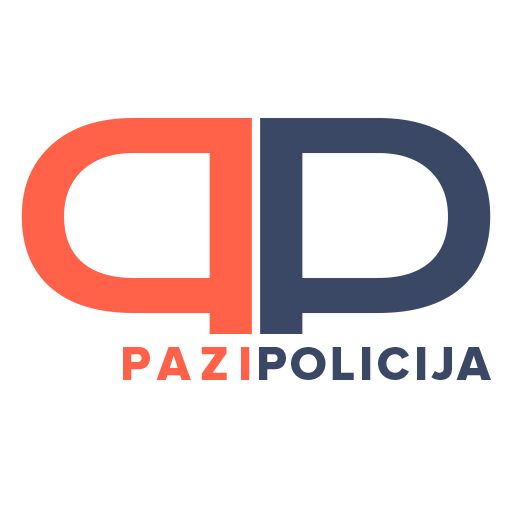
<style>
.page{position:relative;width:512px;height:512px;background:#ffffff}
.page>*{position:absolute;margin:0}
.t1{font:48px "ProximaNova-Extrabld";letter-spacing:0.075em;color:#3b4865}
.t2{font:48px "ProximaNova-Extrabld";letter-spacing:0.2em;color:#ff6248}
.t3{font:48px "ProximaNova-Extrabld";letter-spacing:0.075em;color:#ff6248}
</style>
<div class="page">
<p class="t1" style="left:123px;top:347px;width:368px;height:33px"><span class="t2">PAZ</span><span class="t3">I</span>POLICIJA</p>
</div>
